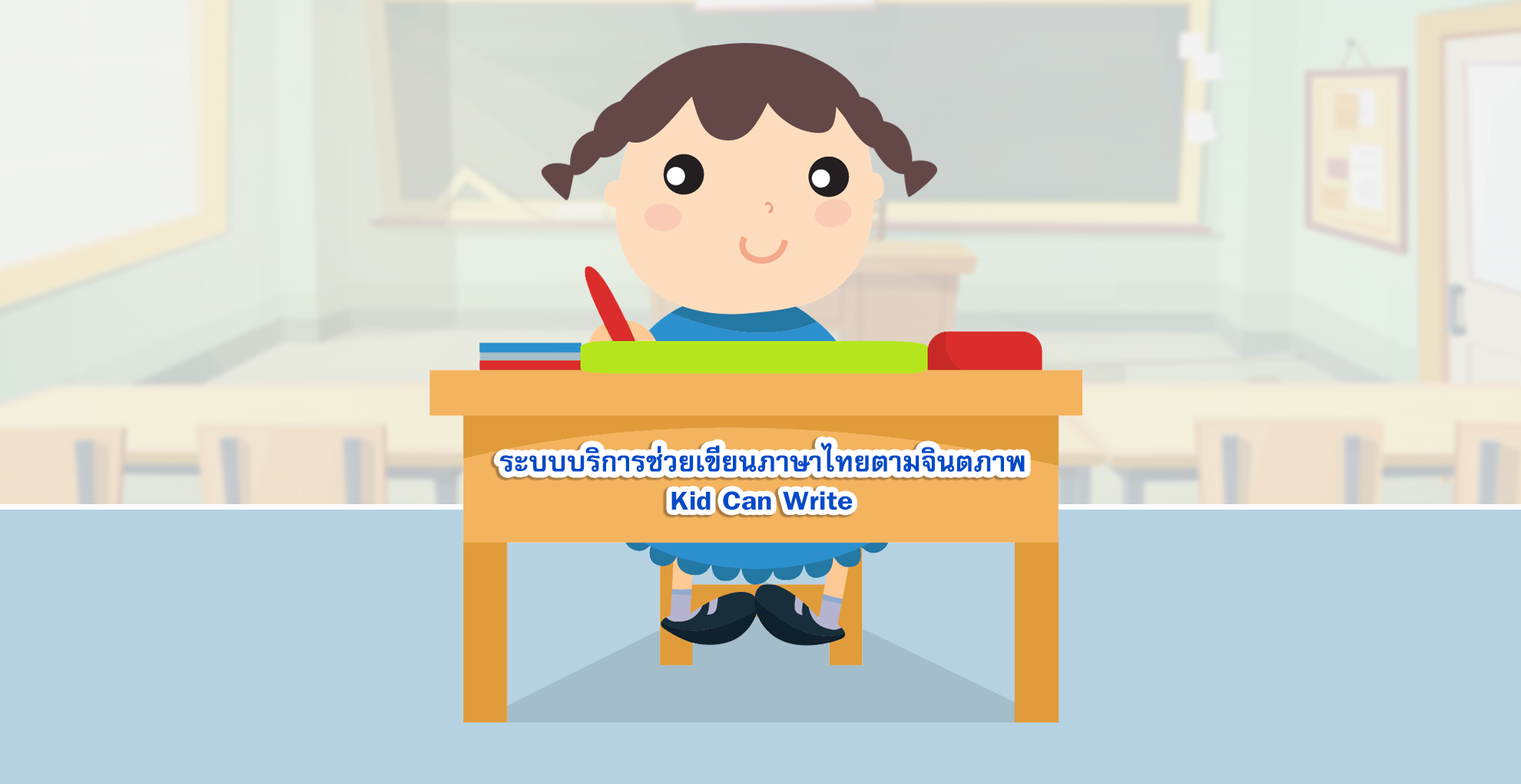
<style>
.page{position:relative;width:1521px;height:784px;background:#b6d2e2}
.page>*{position:absolute;margin:0}
.t1{font:40px "FreesiaUPCBold";letter-spacing:-0.005em;color:#004bc8}
.t2{font:41.5px "FreesiaUPCBold";color:#004bc8;scale:1.11 1}
</style>
<div class="page">
<p class="t1" style="left:499px;top:442px;width:526px;height:30px">ระบบบริการช่วยเขียนภาษาไทยตามจินตภาพ</p>
<p class="t2" style="left:672px;top:491px;width:181px;height:19px">Kid Can Write</p>
</div>
